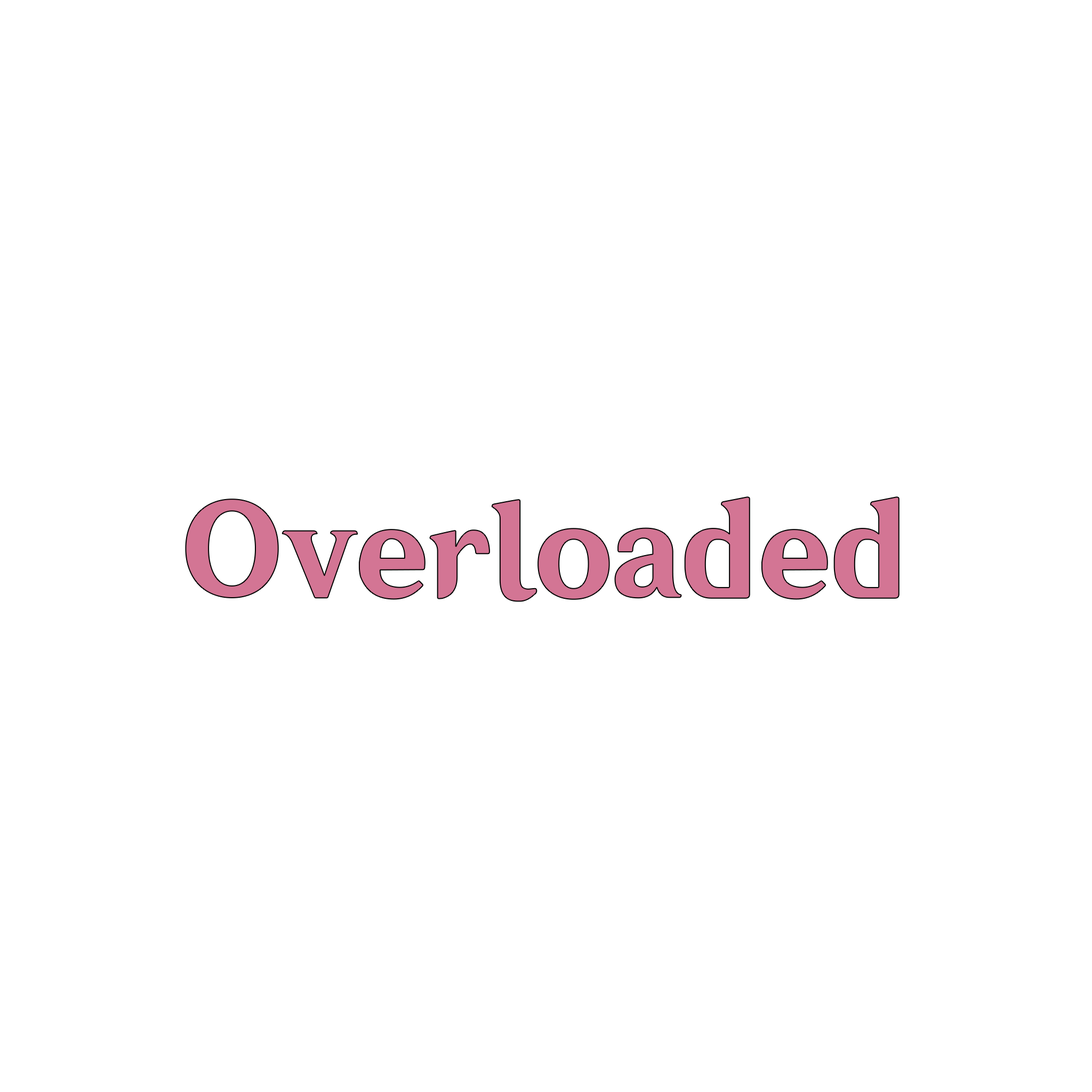
<style>
.page{position:relative;width:1092px;height:1092px;background:#ffffff}
.page>*{position:absolute;margin:0}
.t1{font:122.2px "Default_SC-85W";color:#d37594}
</style>
<div class="page">
<p class="t1" style="left:186px;top:497px;width:713px;height:104px">Overloaded</p>
</div>
